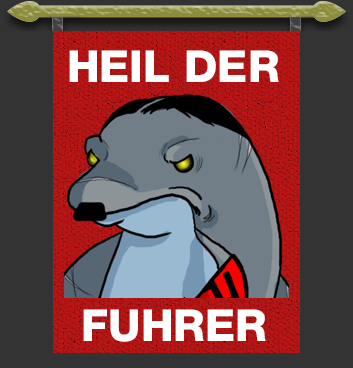
<style>
.page{position:relative;width:353px;height:368px;background:#333333}
.page>*{position:absolute;margin:0}
.t1{font:44px "Helvetica85-Heavy";color:#ffffff}
</style>
<div class="page">
<p class="t1" style="left:69px;top:50px;width:210px;height:32px">HEIL DER</p>
<p class="t1" style="left:83px;top:309px;width:183px;height:33px">FUHRER</p>
</div>
